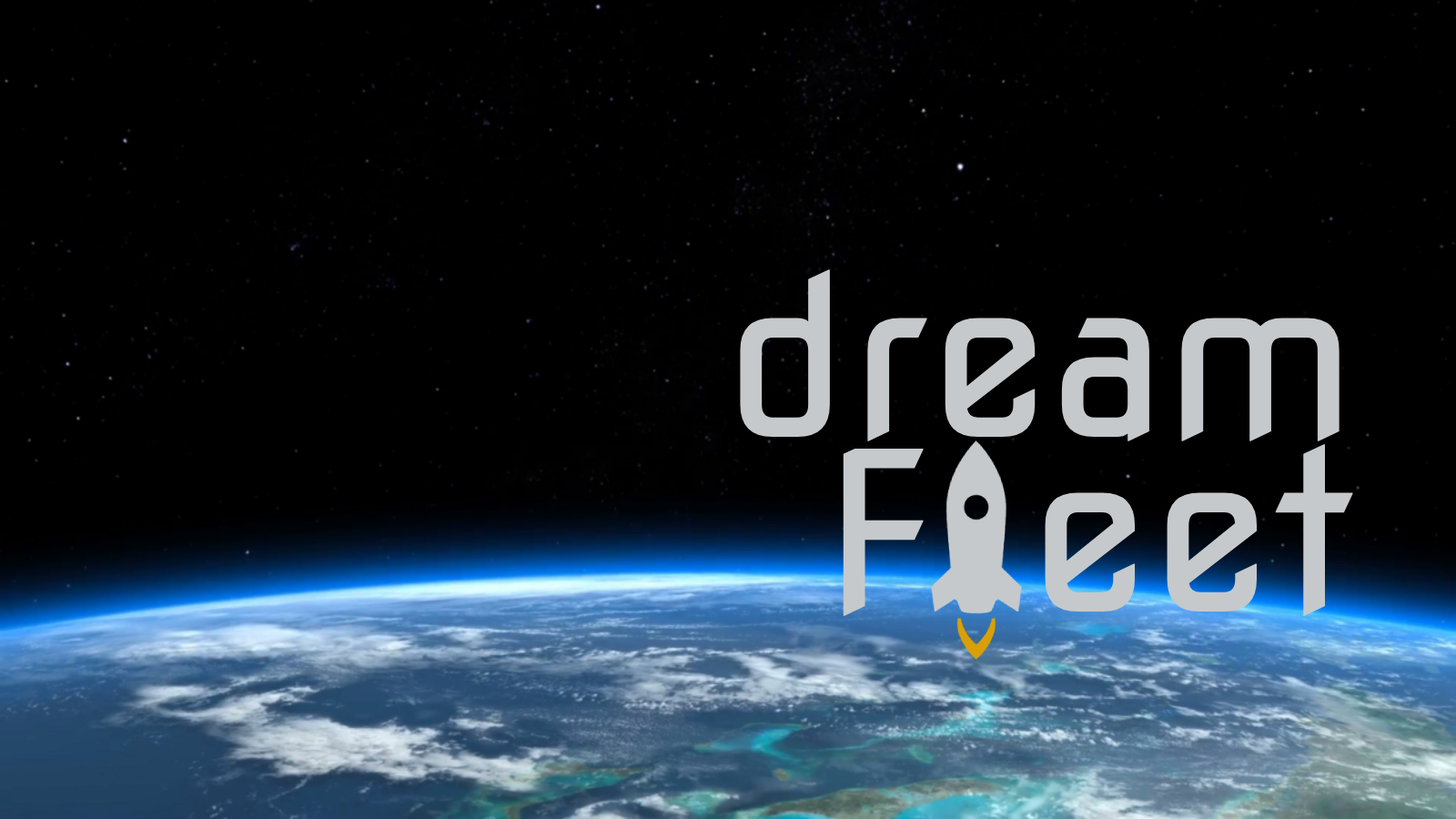
<style>
.page{position:relative;width:1456px;height:819px;background:#000000}
.page>*{position:absolute;margin:0}
.t1{font:221px "NovaSquare";color:#c5c9cb}
.t2{font:221px/147.3px "NovaSquare";color:#c5c9cb}
</style>
<div class="page">
<p class="t1" style="left:740px;top:269px;width:613px;height:347px;text-align:right">dream<br><span class="t2">F eet</span></p>
</div>
